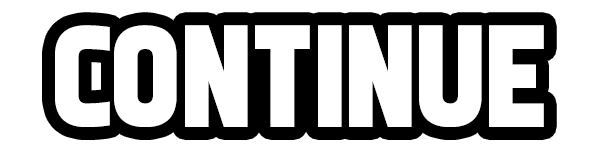
<style>
.page{position:relative;width:600px;height:150px;background:#ffffff}
.page>*{position:absolute;margin:0}
.t1{font:160px "SheSmiles";color:#ffffff}
</style>
<div class="page">
<p class="t1" style="left:55px;top:25px;width:489px;height:102px">continue</p>
</div>
